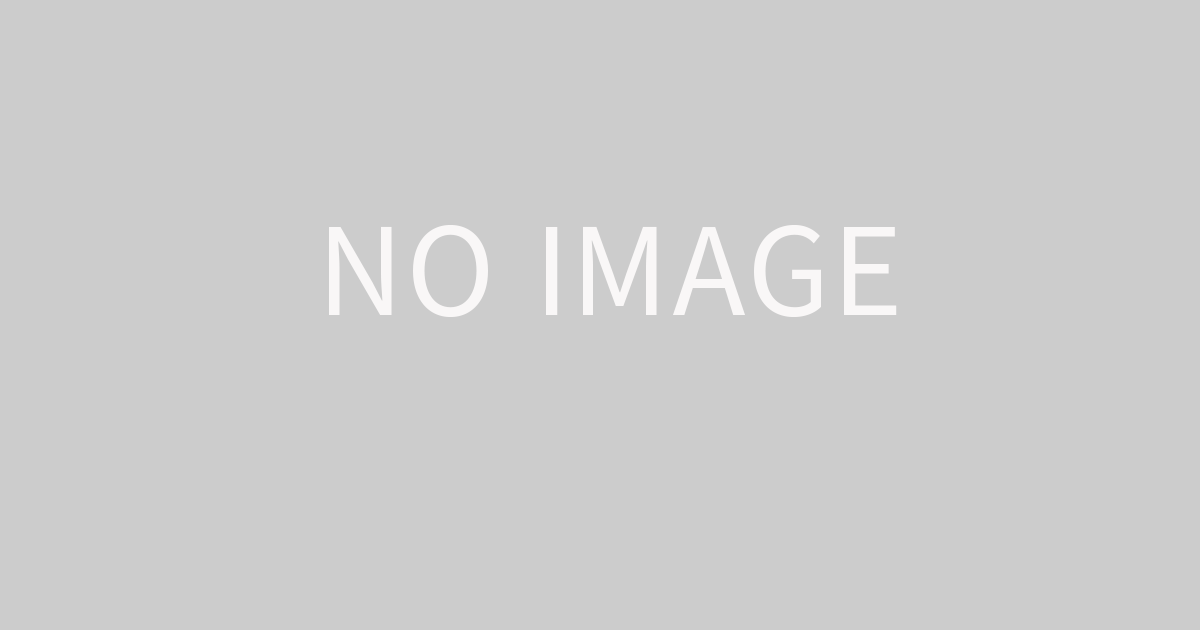
<style>
.page{position:relative;width:1200px;height:630px;background:#cccccc}
.page>*{position:absolute;margin:0}
.t1{font:120px "NotoSansJP-Regular";letter-spacing:0.05em;color:#f9f7f7;text-transform:uppercase}
</style>
<div class="page">
<p class="t1" style="left:329px;top:225px;width:568px;height:92px">No Image</p>
</div>
